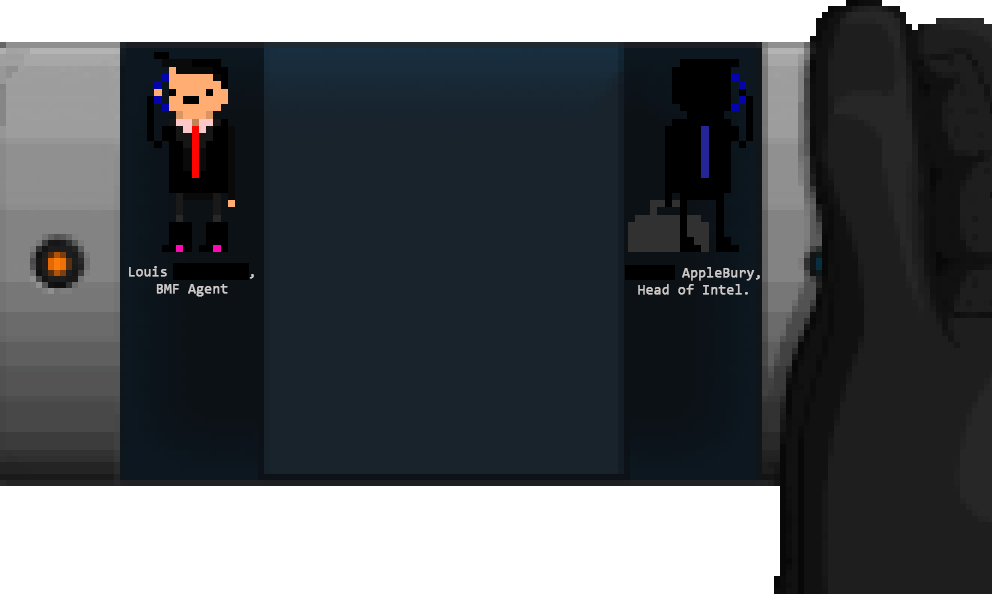
<style>
.page{position:relative;width:992px;height:594px;background:#ffffff}
.page>*{position:absolute;margin:0}
.t1{font:14px "Consolas";color:#cfcaca;font-weight:bold}
</style>
<div class="page">
<p class="t1" style="left:129px;top:266px;width:125px;height:31px;text-align:center">Louis AppleBury,<br>BMF Agent</p>
<p class="t1" style="left:626px;top:267px;width:134px;height:28px;text-align:center">Joness AppleBury,<br>Head of Intel.</p>
</div>
